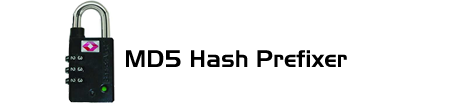
<style>
.page{position:relative;width:453px;height:106px;background:#ffffff}
.page>*{position:absolute;margin:0}
.t1{font:24px "Slicker";color:#000000}
</style>
<div class="page">
<p class="t1" style="left:126px;top:50px;width:221px;height:17px">MD5 Hash Prefixer</p>
</div>
